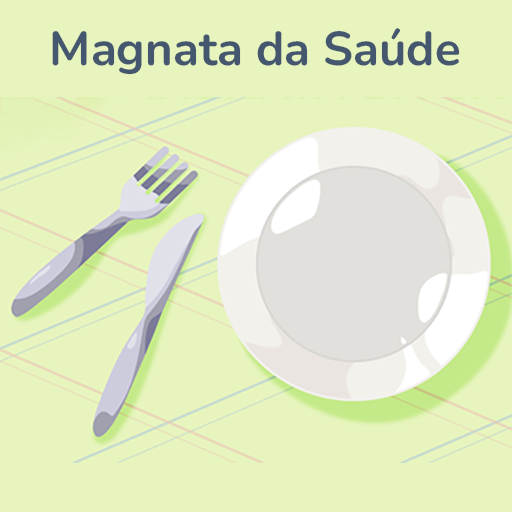
<style>
.page{position:relative;width:512px;height:512px;background:#e7f4be}
.page>*{position:absolute;margin:0}
.t1{font:47.4px "Nunito-Bold";color:#44576f}
</style>
<div class="page">
<p class="t1" style="left:52px;top:28px;width:408px;height:47px">Magnata da Saúde</p>
</div>
